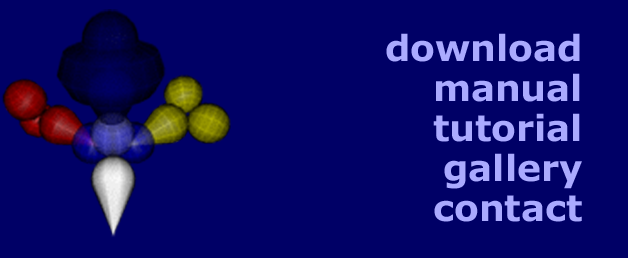
<style>
.page{position:relative;width:628px;height:258px;background:#000066}
.page>*{position:absolute;margin:0}
.t1{font:36px/40px "Verdana-Bold";color:#aaaaff}
</style>
<div class="page">
<p class="t1" style="left:386px;top:33px;width:196px;height:189px;text-align:right">download<br>manual<br>tutorial<br>gallery<br>contact</p>
</div>
